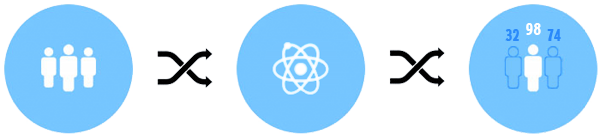
<style>
.page{position:relative;width:600px;height:135px;background:#ffffff}
.page>*{position:absolute;margin:0}
.t1{font:16px "Gothic821CondensedBT-Regular";color:#5eb3fb}
.t2{font:17px "Gothic821CondensedBT-Regular";color:#ffffff}
.t3{font:16px "Gothic821CondensedBT-Regular";color:#5bb0fa}
</style>
<div class="page">
<p class="t1" style="left:505px;top:29px;width:14px;height:12px">32</p>
<p class="t2" style="left:526px;top:23px;width:15px;height:12px">98</p>
<p class="t3" style="left:547px;top:29px;width:14px;height:12px">74</p>
</div>
